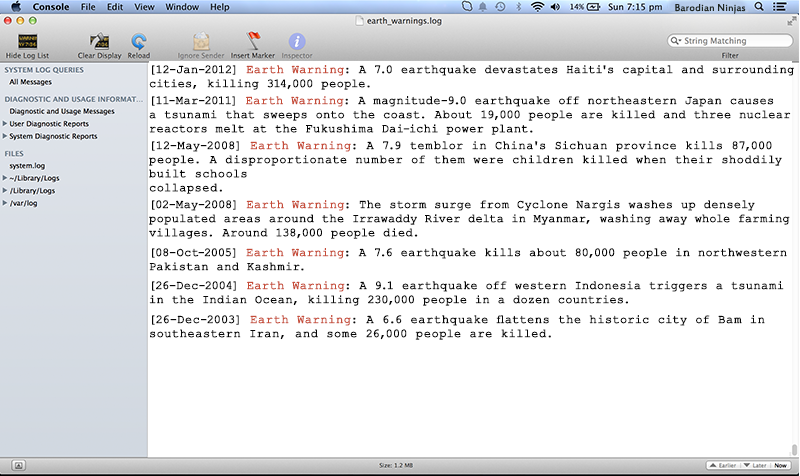
<style>
.page{position:relative;width:800px;height:476px;background:#ffffff}
.page>*{position:absolute;margin:0}
.t1{font:11px "EstrangeloEdessa";letter-spacing:0.01em;color:#212721}
.t2{font:12px/14.1px "CourierNewPSMT";letter-spacing:0.005em;color:#060606;font-weight:bold}
.t3{font:12px/14.1px "CourierNewPSMT";letter-spacing:0.005em;color:#c64c38;font-weight:bold}
.t4{font:12px/14.1px "CourierNewPSMT";letter-spacing:0.025em;color:#060606;font-weight:bold}
.t5{font:12px/14.1px "CourierNewPSMT";letter-spacing:0.025em;color:#c64c38;font-weight:bold}
.t6{font:12px/14.1px "CourierNewPSMT";letter-spacing:-0.01em;color:#060606;font-weight:bold}
</style>
<div class="page">
<p class="t1" style="left:675px;top:4px;width:71px;height:10px">Barodian Ninjas</p>
<p class="t2" style="left:149px;top:65px;width:645px;height:25px">[12-Jan-2012] <span class="t3">Earth Warning</span>: A 7.0 earthquake devastates Haiti's capital and surrounding<br>cities, killing 314,000 people.</p>
<p class="t2" style="left:149px;top:96px;width:642px;height:39px">[11-Mar-2011] <span class="t3">Earth Warning</span>: A magnitude-9.0 earthquake off northeastern Japan causes<br>a tsunami that sweeps onto the coast. About 19,000 people are killed and three nuclear<br>reactors melt at the Fukushima Dai-ichi power plant.</p>
<p class="t4" style="left:149px;top:141px;width:633px;height:53px">[12-May-2008] <span class="t5">Earth Warning</span>: A 7.9 temblor in China's Sichuan province kills 87,000 <br>people. A disproportionate number of them were children killed when their shoddily <br>built schools<br>collapsed.</p>
<p class="t2" style="left:149px;top:200px;width:641px;height:39px">[02-May-2008] <span class="t3">Earth Warning</span>: The storm surge from Cyclone Nargis washes up densely <br>populated areas around the <span class="t6">Irrawaddy River delta in Myanmar, washing away whole farming <br></span>villages. Around 138,000 people died.</p>
<p class="t2" style="left:149px;top:248px;width:638px;height:23px">[08-Oct-2005] <span class="t3">Earth Warning</span>: A 7.6 earthquake kills about 80,000 people in northwestern<br>Pakistan and Kashmir.</p>
<p class="t2" style="left:149px;top:281px;width:635px;height:25px">[26-Dec-2004] <span class="t3">Earth Warning</span>: A 9.1 earthquake off western Indonesia triggers a tsunami<br>in the Indian Ocean, killing 230,000 people in a dozen countries.</p>
<p class="t4" style="left:150px;top:315px;width:615px;height:25px">[26-Dec-2003] <span class="t5">Earth Warning</span>: A 6.6 earthquake flattens the historic city of Bam in <br>southeastern Iran, and some 26,000 people are killed.</p>
</div>
